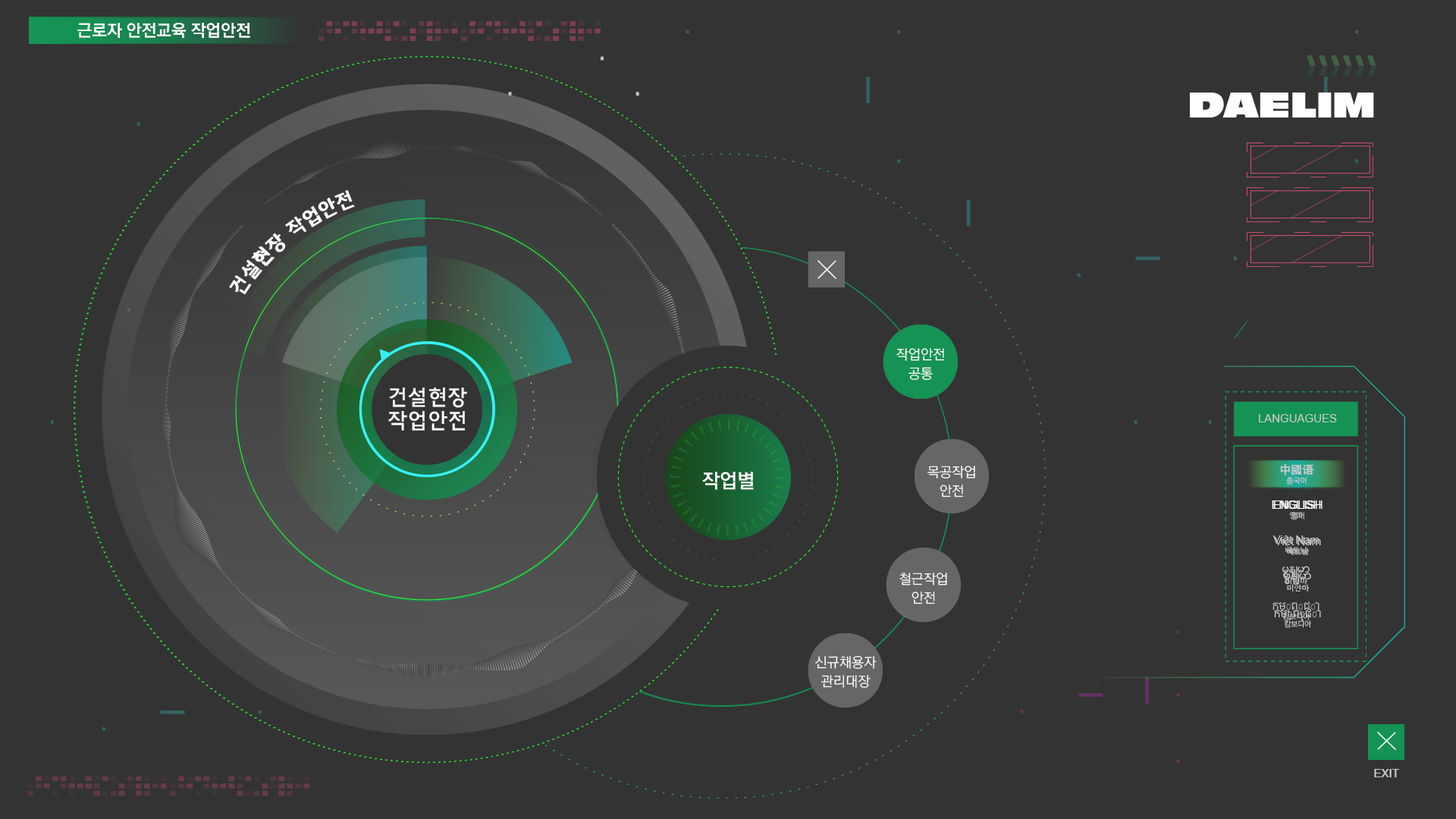
<style>
.page{position:relative;width:1456px;height:819px;background:#333333}
.page>*{position:absolute;margin:0}
.t1{font:16.7px "RixGoB";color:#ffffff}
.t2{font:13.6px/19px "RixGoL";color:#ffffff}
.t3{font:21px/23.5px "THEJung150";color:#ffffff}
.t4{font:11.4px "ArialMT";color:#cbcbcb}
.t5{font:19.7px "RixGoB";color:#ffffff}
.t6{font:11.4px "AdobeHeitiStd-Regular";color:#cbcbcb}
.t7{font:7.6px "RixGoL";color:#cbcbcb}
.t8{font:11.4px "ArialMT";color:#ffffff}
.t9{font:7.6px "AppleGothic";color:#cbcbcb}
.t10{font:11.4px "Zawgyi-One";color:#cbcbcb}
.t11{font:7.6px/11.4px "AppleGothic";color:#cbcbcb}
.t12{font:11.4px "KhmerSangamMN";color:#cbcbcb}
</style>
<div class="page">
<p class="t1" style="left:77px;top:23px;width:173px;height:15px">근로자 안전교육 작업안전</p>
<p class="t2" style="left:896px;top:348px;width:48px;height:32px;text-align:center">작업안전<br>공통</p>
<p class="t3" style="left:388px;top:388px;width:79px;height:43px;text-align:center">건설현장<br>작업안전</p>
<p class="t4" style="left:1259px;top:414px;width:78px;height:8px">LANGUAGUES</p>
<p class="t5" style="left:702px;top:472px;width:52px;height:18px">작업별</p>
<p class="t2" style="left:927px;top:466px;width:48px;height:31px;text-align:center">목공작업<br>안전</p>
<p class="t6" style="left:1281px;top:464px;width:33px;height:21px;text-align:center">中國语<br><span class="t7">중국어</span></p>
<p class="t8" style="left:1273px;top:500px;width:50px;height:19px;text-align:center">ENGLISH<br><span class="t7">영어</span></p>
<p class="t4" style="left:1274px;top:537px;width:47px;height:18px;text-align:center">Việt Nam<br><span class="t9">베트남</span></p>
<p class="t2" style="left:899px;top:573px;width:48px;height:31px;text-align:center">철근작업<br>안전</p>
<p class="t10" style="left:1283px;top:573px;width:28px;height:18px;text-align:center">မြန်မာ<br><span class="t11">미얀마</span></p>
<p class="t12" style="left:1274px;top:609px;width:47px;height:19px;text-align:center">កម្ពុជា<br><span class="t7">캄보디아</span></p>
<p class="t2" style="left:815px;top:656px;width:62px;height:32px;text-align:center">신규채용자<br>관리대장</p>
<p class="t4" style="left:1374px;top:769px;width:25px;height:8px">EXIT</p>
</div>
